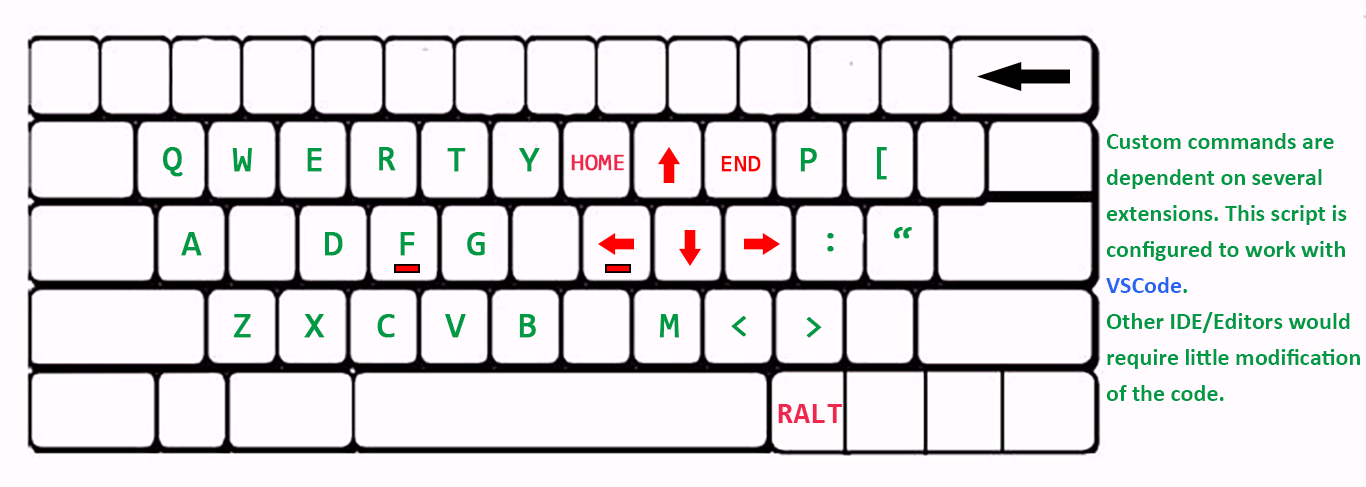
<style>
.page{position:relative;width:1366px;height:487px;background:#fffbff}
.page>*{position:absolute;margin:0}
.t1{font:24px/36px "Calibri-Bold";color:#009944}
.t2{font:24px/36px "Calibri-Bold";color:#2764f0}
.t3{font:36px "Consolas";color:#009944;font-weight:bold}
.t4{font:24px "Consolas";color:#f0274d;font-weight:bold}
.t5{font:24px "Consolas";color:#ff0000;font-weight:bold}
</style>
<div class="page">
<p class="t1" style="left:1106px;top:133px;width:254px;height:268px">Custom commands are <br>dependent on several<br>extensions. This script is <br>configured to work with <br><span class="t2">VSCode</span>.<br>Other IDE/Editors would <br>require little modification<br>of the code.</p>
<p class="t3" style="left:163px;top:147px;width:20px;height:30px">Q</p>
<p class="t3" style="left:232px;top:148px;width:20px;height:24px">W</p>
<p class="t3" style="left:307px;top:148px;width:15px;height:24px">E</p>
<p class="t3" style="left:379px;top:147px;width:17px;height:24px">R</p>
<p class="t3" style="left:447px;top:148px;width:19px;height:24px">T</p>
<p class="t3" style="left:519px;top:148px;width:21px;height:24px">Y</p>
<p class="t3" style="left:800px;top:148px;width:17px;height:24px">P</p>
<p class="t3" style="left:877px;top:147px;width:10px;height:33px">[</p>
<p class="t4" style="left:571px;top:154px;width:53px;height:17px">HOME</p>
<p class="t5" style="left:721px;top:156px;width:40px;height:16px">END</p>
<p class="t3" style="left:181px;top:232px;width:21px;height:24px">A</p>
<p class="t3" style="left:325px;top:232px;width:18px;height:24px">D</p>
<p class="t3" style="left:400px;top:232px;width:15px;height:24px">F</p>
<p class="t3" style="left:467px;top:232px;width:18px;height:24px">G</p>
<p class="t3" style="left:827px;top:233px;width:7px;height:19px">:</p>
<p class="t3" style="left:893px;top:227px;width:19px;height:12px">“</p>
<p class="t3" style="left:233px;top:314px;width:18px;height:24px">Z</p>
<p class="t3" style="left:304px;top:314px;width:21px;height:24px">X</p>
<p class="t3" style="left:377px;top:314px;width:18px;height:24px">C</p>
<p class="t3" style="left:445px;top:314px;width:21px;height:24px">V</p>
<p class="t3" style="left:519px;top:314px;width:17px;height:24px">B</p>
<p class="t3" style="left:659px;top:314px;width:20px;height:24px">M</p>
<p class="t3" style="left:731px;top:316px;width:15px;height:21px">&lt;</p>
<p class="t3" style="left:806px;top:317px;width:16px;height:21px">&gt;</p>
</div>
